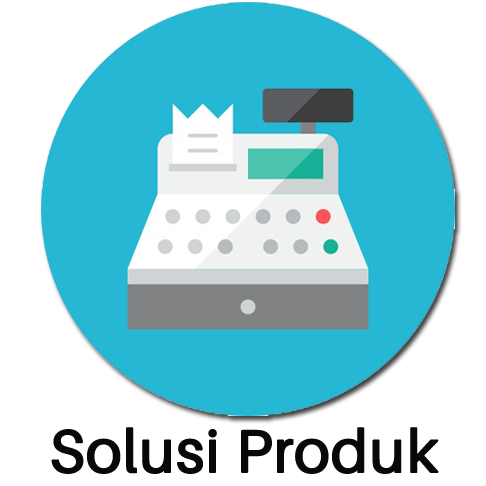
<style>
.page{position:relative;width:486px;height:486px;background:#ffffff}
.page>*{position:absolute;margin:0}
.t1{font:60px "Aileron-Regular";color:#080808;font-weight:bold}
</style>
<div class="page">
<p class="t1" style="left:51px;top:427px;width:388px;height:47px">Solusi Produk</p>
</div>
